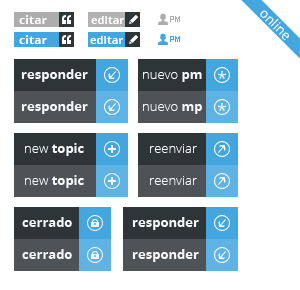
<style>
.page{position:relative;width:300px;height:290px;background:#ffffff}
.page>*{position:absolute;margin:0}
.t1{font:12px "OpenSans-Bold";color:#ffffff}
.t2{font:11px "OpenSans-Bold";color:#ffffff}
.t3{font:13px "OpenSans-Bold";color:#f7f7f7}
.t4{font:13px "OpenSans-Light";color:#f7f7f7}
</style>
<div class="page">
<p class="t1" style="left:19px;top:15px;width:28px;height:9px">citar</p>
<p class="t2" style="left:91px;top:16px;width:34px;height:8px">editar</p>
<p class="t1" style="left:19px;top:35px;width:28px;height:9px">citar</p>
<p class="t2" style="left:90px;top:36px;width:34px;height:8px">editar</p>
<p class="t3" style="left:21px;top:69px;width:67px;height:13px">responder</p>
<p class="t4" style="left:143px;top:72px;width:59px;height:10px">nuevo<span class="t3"> pm</span></p>
<p class="t3" style="left:21px;top:101px;width:67px;height:13px">responder</p>
<p class="t4" style="left:143px;top:104px;width:59px;height:10px">nuevo <span class="t3">mp</span></p>
<p class="t3" style="left:25px;top:143px;width:59px;height:13px"><span class="t4">new </span>topic</p>
<p class="t4" style="left:150px;top:144px;width:47px;height:9px">reenviar</p>
<p class="t3" style="left:25px;top:175px;width:59px;height:13px"><span class="t4">new </span>topic</p>
<p class="t4" style="left:150px;top:176px;width:47px;height:9px">reenviar</p>
<p class="t3" style="left:22px;top:217px;width:50px;height:10px">cerrado</p>
<p class="t3" style="left:132px;top:217px;width:67px;height:13px">responder</p>
<p class="t3" style="left:22px;top:249px;width:50px;height:10px">cerrado</p>
<p class="t3" style="left:132px;top:249px;width:67px;height:13px">responder</p>
</div>
